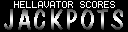
<style>
.page{position:relative;width:128px;height:32px;background:#000000}
.page>*{position:absolute;margin:0}
.t1{font:8px "Terminal";color:#ffffff}
</style>
<div class="page">
<p class="t1" style="left:14px;top:1px;width:101px;height:7px">HELLAVATOR SCORES</p>
</div>
